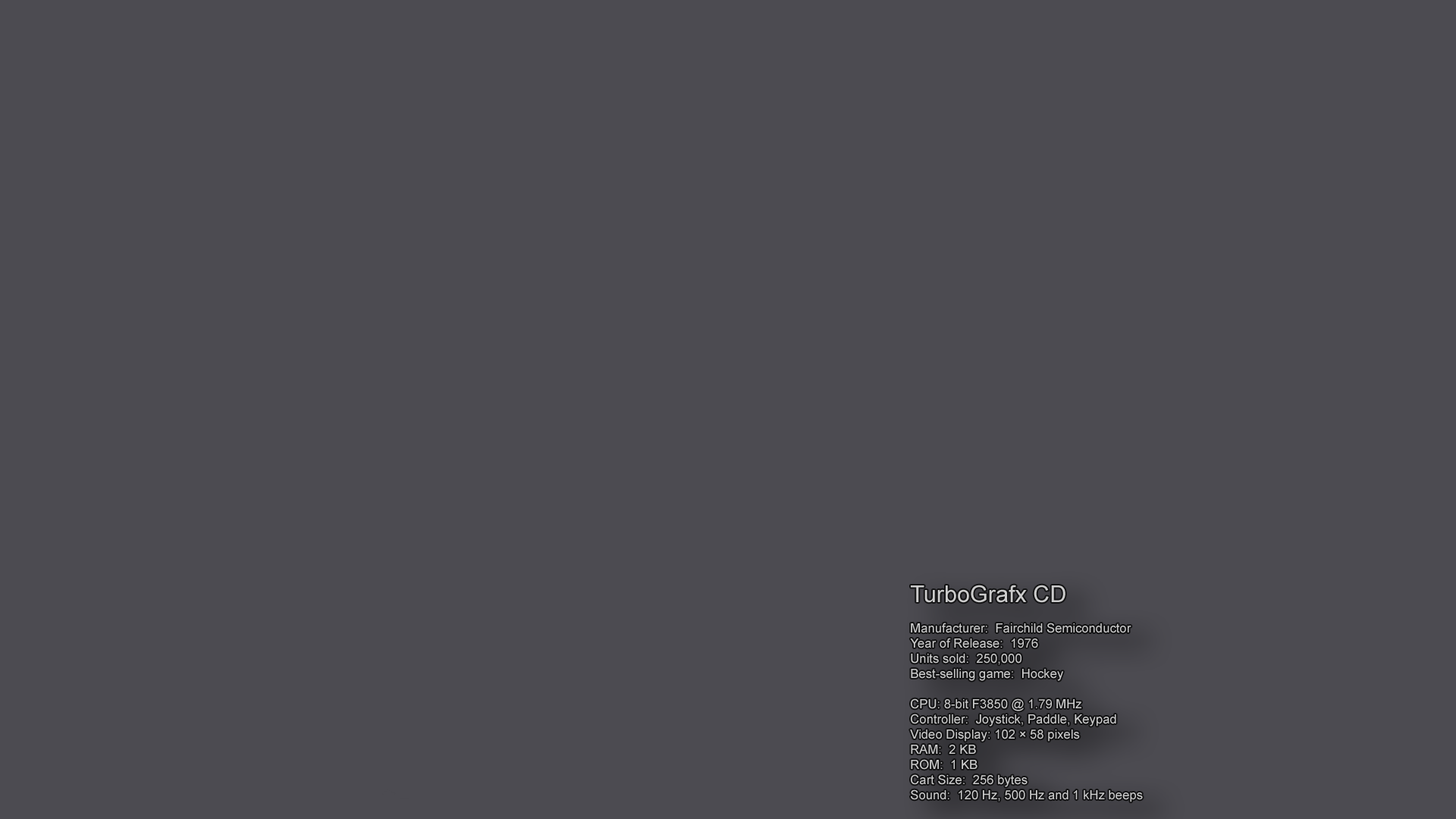
<style>
.page{position:relative;width:1456px;height:819px;background:#4c4b51}
.page>*{position:absolute;margin:0}
.t1{font:12.6px "ArialMT";color:#cccccc}
.t2{font:23.2px "ArialMT";color:#cccccc}
</style>
<div class="page">
<p class="t1" style="left:910px;top:585px;width:233px;height:217px"><span class="t2">TurboGrafx CD<br></span><br>Manufacturer:  Fairchild Semiconductor<br>Year of Release:  1976<br>Units sold:  250,000<br>Best-selling game:  Hockey<br><br>CPU: 8-bit F3850 @ 1.79 MHz <br>Controller:  Joystick, Paddle, Keypad<br>Video Display: 102 × 58 pixels<br>RAM:  2 KB<br>ROM:  1 KB<br>Cart Size:  256 bytes<br>Sound:  120 Hz, 500 Hz and 1 kHz beeps</p>
</div>
